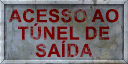
<style>
.page{position:relative;width:128px;height:64px}
.page>*{position:absolute;margin:0}
.t1{font:18px/17.3px "Arial-BoldMT";letter-spacing:-0.01em;text-transform:uppercase}
</style>
<div class="page">
<p class="t1" style="left:8px;top:9px;width:111px;height:49px;text-align:center">Acesso ao<br>túnel de<br>saída</p>
</div>
